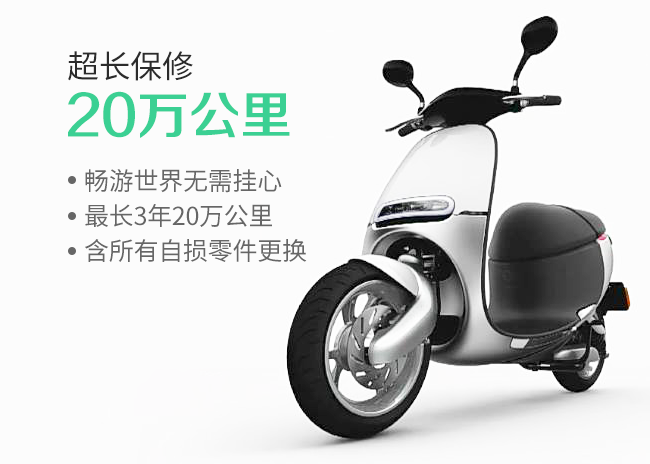
<style>
.page{position:relative;width:650px;height:464px;background:#fcfcfc}
.page>*{position:absolute;margin:0}
.t1{font:32px "SourceHanSansCN-Regular";letter-spacing:-0.01em;color:#2b2b2b}
.t2{font:52px "FZZZHONGJW--GB1-0";letter-spacing:-0.01em;color:#3bd093}
.t3{font:25px "SourceHanSansCN-Regular";letter-spacing:-0.01em;color:#666666}
</style>
<div class="page">
<p class="t1" style="left:68px;top:51px;width:125px;height:30px">超长保修</p>
<p class="t2" style="left:68px;top:91px;width:222px;height:47px">20万公里</p>
<p class="t3" style="left:85px;top:169px;width:197px;height:24px">畅游世界无需挂心</p>
<p class="t3" style="left:85px;top:204px;width:187px;height:23px">最长3年20万公里</p>
<p class="t3" style="left:85px;top:239px;width:222px;height:23px">含所有自损零件更换</p>
</div>
